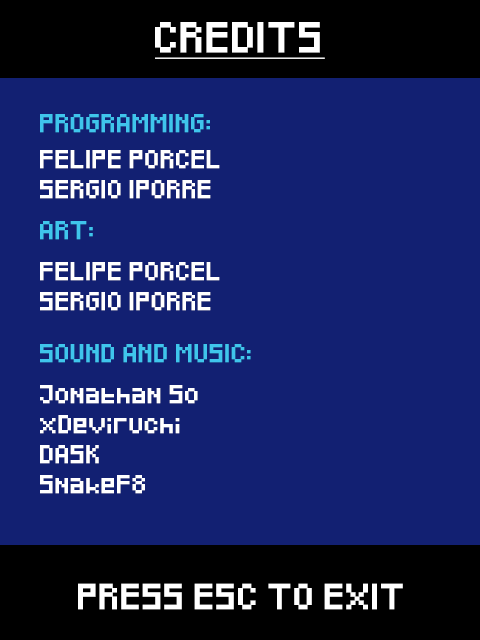
<style>
.page{position:relative;width:480px;height:640px;background:#122072}
.page>*{position:absolute;margin:0}
.t1{font:25px "Pixeled";color:#ffffff;font-weight:bold;text-decoration:underline}
.t2{font:15px "Pixeled";color:#3fc5ec;font-weight:bold}
.t3{font:15px/30px "Pixeled";color:#ffffff;font-weight:bold}
.t4{font:21px "Pixeled";color:#ffffff;font-weight:bold}
</style>
<div class="page">
<p class="t1" style="left:155px;top:22px;width:170px;height:37px">CREDITS</p>
<p class="t2" style="left:40px;top:114px;width:170px;height:19px">PROGRAMMING:</p>
<p class="t3" style="left:40px;top:150px;width:180px;height:49px">FELIPE PORCEL<br>SERGIO IPORRE</p>
<p class="t2" style="left:40px;top:221px;width:53px;height:19px">ART:</p>
<p class="t3" style="left:40px;top:262px;width:180px;height:49px">FELIPE PORCEL<br>SERGIO IPORRE</p>
<p class="t2" style="left:40px;top:344px;width:211px;height:19px">SOUND AND MUSIC:</p>
<p class="t3" style="left:40px;top:385px;width:158px;height:109px">Jonathan So<br>xDeviruchi<br>DASK<br>SnakeF8</p>
<p class="t4" style="left:78px;top:583px;width:325px;height:27px">PRESS ESC TO EXIT</p>
</div>
